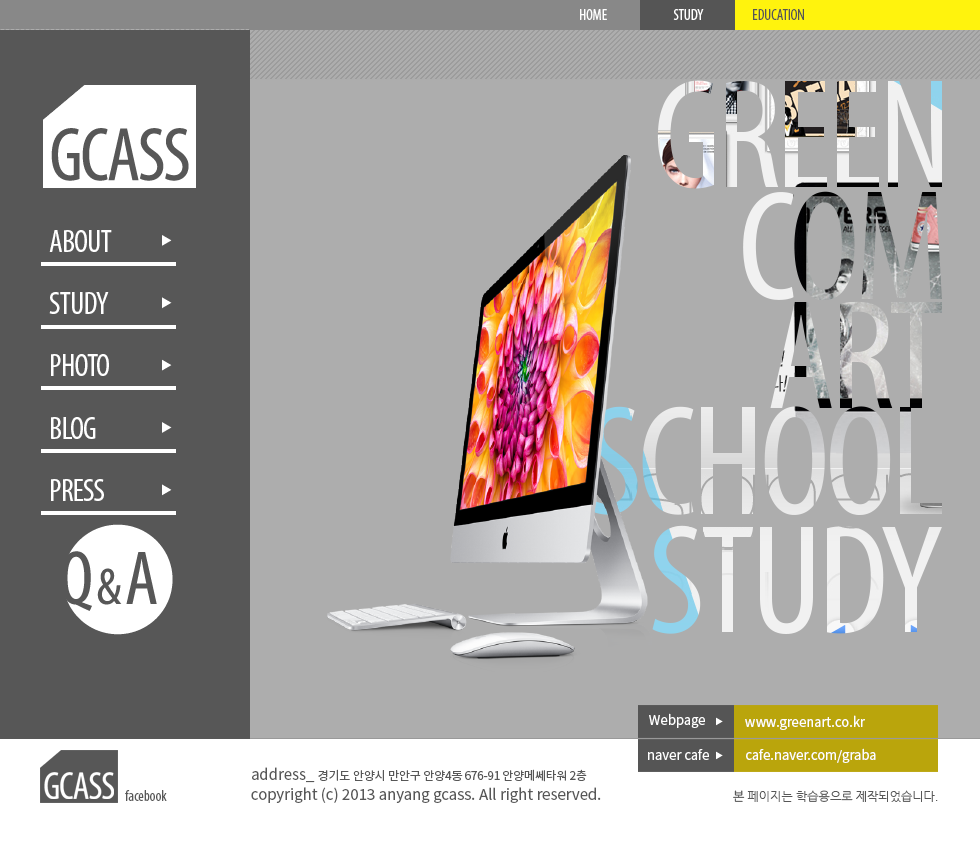
<style>
.page{position:relative;width:980px;height:850px;background:#adadad}
.page>*{position:absolute;margin:0}
.t1{font:15px "MyriadPro-Cond";color:#ffffff}
.t2{font:15px "MyriadPro-Cond";color:#555555}
.t3{font:31.5px "MyriadPro-Cond";letter-spacing:-0.03em;color:#ffffff}
.t4{font:13px "NotoSansCJKkr-Regular";color:#ffffff}
.t5{font:12px "NotoSansCJKkr-Regular";letter-spacing:-0.025em;color:#575757}
.t6{font:15px "NotoSansCJKkr-Regular";color:#575757}
.t7{font:15px "MyriadPro-Cond";color:#575757}
.t8{font:12px "NanumGothic";color:#575757}
</style>
<div class="page">
<p class="t1" style="left:580px;top:9px;width:27px;height:11px">HOME</p>
<p class="t1" style="left:673px;top:9px;width:31px;height:11px">STUDY</p>
<p class="t2" style="left:753px;top:9px;width:51px;height:11px">EDUCATION</p>
<p class="t3" style="left:49px;top:230px;width:63px;height:22px">ABOUT</p>
<p class="t3" style="left:49px;top:292px;width:60px;height:22px">STUDY</p>
<p class="t3" style="left:51px;top:354px;width:58px;height:22px">PHOTO</p>
<p class="t3" style="left:51px;top:417px;width:45px;height:22px">BLOG</p>
<p class="t3" style="left:51px;top:479px;width:53px;height:22px">PRESS</p>
<p class="t4" style="left:649px;top:713px;width:56px;height:15px">Webpage</p>
<p class="t4" style="left:745px;top:715px;width:120px;height:15px">www.greenart.co.kr</p>
<p class="t4" style="left:648px;top:749px;width:61px;height:11px">naver cafe</p>
<p class="t4" style="left:746px;top:748px;width:130px;height:15px">cafe.naver.com/graba</p>
<p class="t5" style="left:252px;top:767px;width:335px;height:16px"><span class="t6">address_ </span>경기도 안양시 만안구 안양4동 676-91 안양메쎄타워 2층</p>
<p class="t7" style="left:125px;top:790px;width:42px;height:11px">facebook</p>
<p class="t6" style="left:251px;top:787px;width:350px;height:16px">copyright (c) 2013 anyang gcass. All right reserved.</p>
<p class="t8" style="left:733px;top:790px;width:205px;height:12px">본 페이지는 학습용으로 제작되었습니다.</p>
</div>
